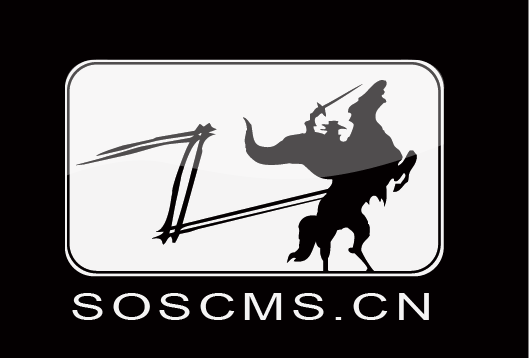
<style>
.page{position:relative;width:529px;height:358px;background:#040001}
.page>*{position:absolute;margin:0}
.t1{font:37.5px "ARDS1";letter-spacing:0.1em;color:#f5f4f4;scale:1.41 1}
</style>
<div class="page">
<p class="t1" style="left:72px;top:293px;width:357px;height:27px">SOSCMS.CN</p>
</div>
